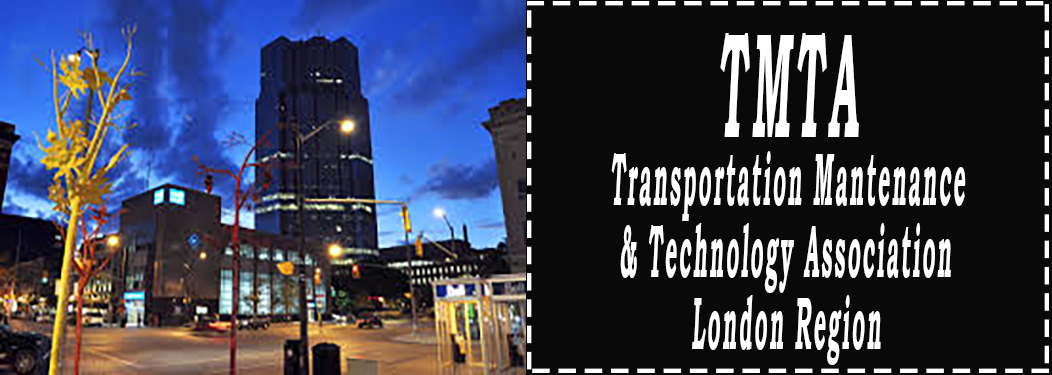
<style>
.page{position:relative;width:1052px;height:375px;background:#0a090a}
.page>*{position:absolute;margin:0}
.t1{font:150px "BookmanOldStyle-Bold";letter-spacing:0.1em;color:#ffffff;font-style:italic;scale:0.28 1}
.t2{font:75px/36px "BookmanOldStyle-Bold";letter-spacing:0.1em;color:#ffffff;font-style:italic;scale:0.28 1}
</style>
<div class="page">
<p class="t1" style="left:720px;top:33px;width:139px;height:104px">TMTA</p>
<p class="t2" style="left:611px;top:151px;width:355px;height:214px">Transportation Mantenance<br><br> &amp; Technology Association<br><br>   London Region</p>
</div>
